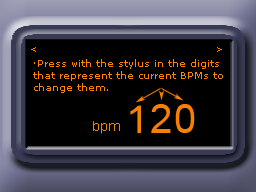
<style>
.page{position:relative;width:256px;height:192px;background:#000000}
.page>*{position:absolute;margin:0}
.t1{font:9px "MSReferenceSansSerif";color:#ff8400}
.t2{font:10px "MSReferenceSansSerif";color:#ff8400}
</style>
<div class="page">
<p class="t1" style="left:31px;top:47px;width:5px;height:5px">&lt;</p>
<p class="t1" style="left:217px;top:47px;width:5px;height:5px">&gt;</p>
<p class="t2" style="left:33px;top:59px;width:190px;height:34px">·Press with the stylus in the digits <br>that represent the current BPMs to <br>change them.</p>
</div>
